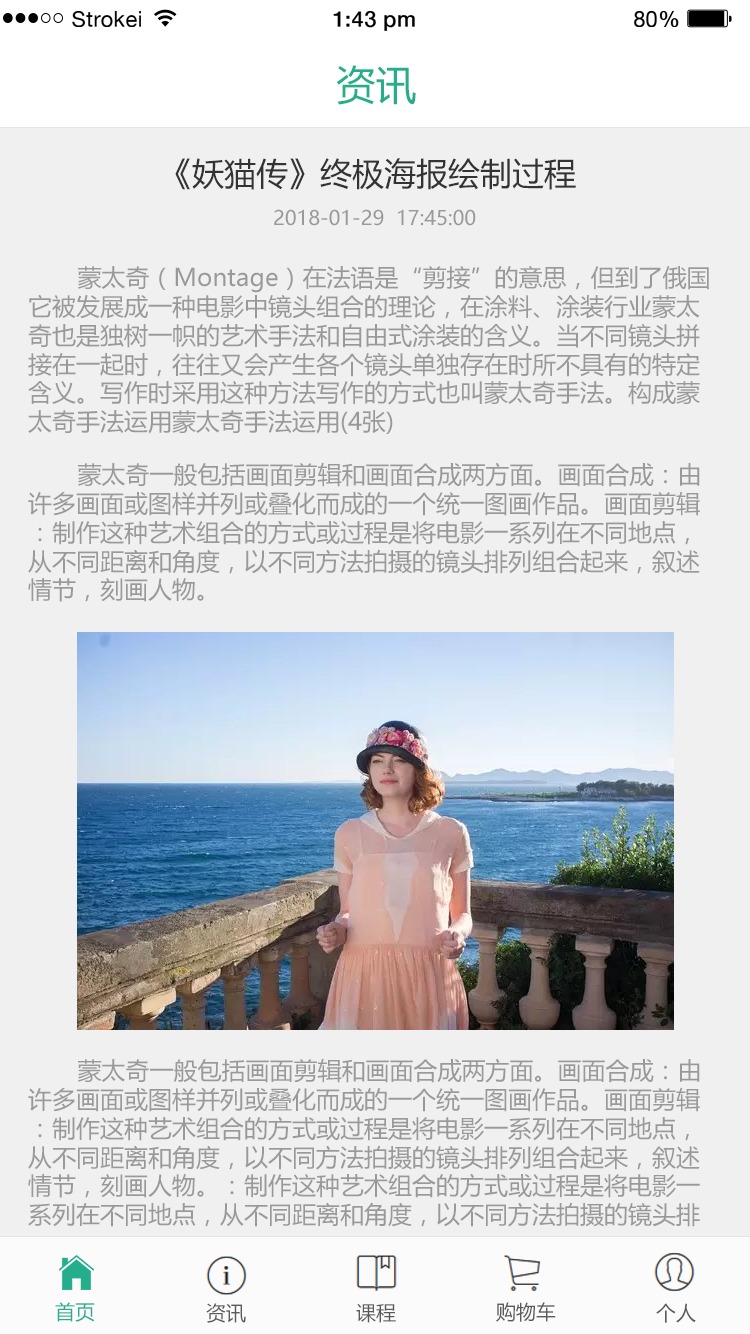
<style>
.page{position:relative;width:750px;height:1334px;background:#f0f0f0}
.page>*{position:absolute;margin:0}
.t1{font:21.8px "HelveticaNeue";letter-spacing:0.02em;color:#000000}
.t2{font:21.8px "HelveticaNeue-Medium";letter-spacing:0.02em;color:#000000}
.t3{font:40px "MicrosoftYaHei";color:#24ae8c}
.t4{font:32px "MicrosoftYaHei";color:#333333}
.t5{font:20px "MicrosoftYaHei";color:#999999}
.t6{font:24px "MicrosoftYaHei";color:#999999}
.t7{font:20px "MicrosoftYaHei";color:#24ae8c}
.t8{font:20px "MicrosoftYaHei";color:#5b5b5b}
</style>
<div class="page">
<p class="t1" style="left:72px;top:11px;width:69px;height:16px">Strokei</p>
<p class="t2" style="left:333px;top:11px;width:82px;height:20px">1:43 pm</p>
<p class="t1" style="left:634px;top:11px;width:45px;height:16px">80<span class="t2">%</span></p>
<p class="t3" style="left:336px;top:65px;width:80px;height:40px">资讯</p>
<p class="t4" style="left:175px;top:158px;width:401px;height:32px">《妖猫传》终极海报绘制过程</p>
<p class="t5" style="left:274px;top:209px;width:202px;height:17px">2018-01-29  17:45:00</p>
<p class="t6" style="left:28px;top:265px;width:681px;height:169px">蒙太奇（Montage）在法语是“剪接”的意思，但到了俄国它被发展成一种电影中镜头组合的理论，在涂料、涂装行业蒙太奇也是独树一帜的艺术手法和自由式涂装的含义。当不同镜头拼接在一起时，往往又会产生各个镜头单独存在时所不具有的特定含义。写作时采用这种方法写作的方式也叫蒙太奇手法。构成蒙太奇手法运用蒙太奇手法运用(4张)</p>
<p class="t6" style="left:28px;top:462px;width:672px;height:140px">蒙太奇一般包括画面剪辑和画面合成两方面。画面合成：由许多画面或图样并列或叠化而成的一个统一图画作品。画面剪辑：制作这种艺术组合的方式或过程是将电影一系列在不同地点，从不同距离和角度，以不同方法拍摄的镜头排列组合起来，叙述情节，刻画人物。</p>
<p class="t6" style="left:28px;top:1058px;width:672px;height:169px">蒙太奇一般包括画面剪辑和画面合成两方面。画面合成：由许多画面或图样并列或叠化而成的一个统一图画作品。画面剪辑：制作这种艺术组合的方式或过程是将电影一系列在不同地点，从不同距离和角度，以不同方法拍摄的镜头排列组合起来，叙述情节，刻画人物。：制作这种艺术组合的方式或过程是将电影一系列在不同地点，从不同距离和角度，以不同方法拍摄的镜头排列组合起来，叙述情节，刻画人物。</p>
<p class="t7" style="left:55px;top:1302px;width:40px;height:20px">首页</p>
<p class="t8" style="left:496px;top:1302px;width:60px;height:20px">购物车</p>
<p class="t8" style="left:206px;top:1303px;width:40px;height:20px">资讯</p>
<p class="t8" style="left:356px;top:1303px;width:40px;height:20px">课程</p>
<p class="t8" style="left:656px;top:1303px;width:40px;height:20px">个人</p>
</div>
